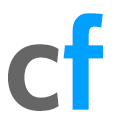
<style>
.page{position:relative;width:114px;height:114px;background:#ffffff}
.page>*{position:absolute;margin:0}
.t1{font:128.2px "Cabin-Bold";color:#00a0ff}
.t2{font:128.2px "Cabin-Bold";color:#666666}
</style>
<div class="page">
<p class="t1" style="left:63px;top:13px;width:40px;height:97px">f</p>
<p class="t2" style="left:8px;top:44px;width:51px;height:67px">c</p>
</div>
